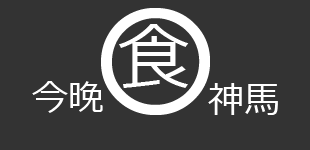
<style>
.page{position:relative;width:310px;height:150px;background:#333333}
.page>*{position:absolute;margin:0}
.t1{font:144px "CenturyGothic";color:#ffffff}
.t2{font:72px "Meiryo";color:#ffffff}
.t3{font:36px "Meiryo";color:#ffffff}
</style>
<div class="page">
<p class="t1" style="left:101px;top:8px;width:109px;height:107px">O</p>
<p class="t2" style="left:119px;top:24px;width:70px;height:64px">食</p>
<p class="t3" style="left:32px;top:81px;width:71px;height:32px">今晚</p>
<p class="t3" style="left:208px;top:83px;width:70px;height:32px">神馬</p>
</div>
